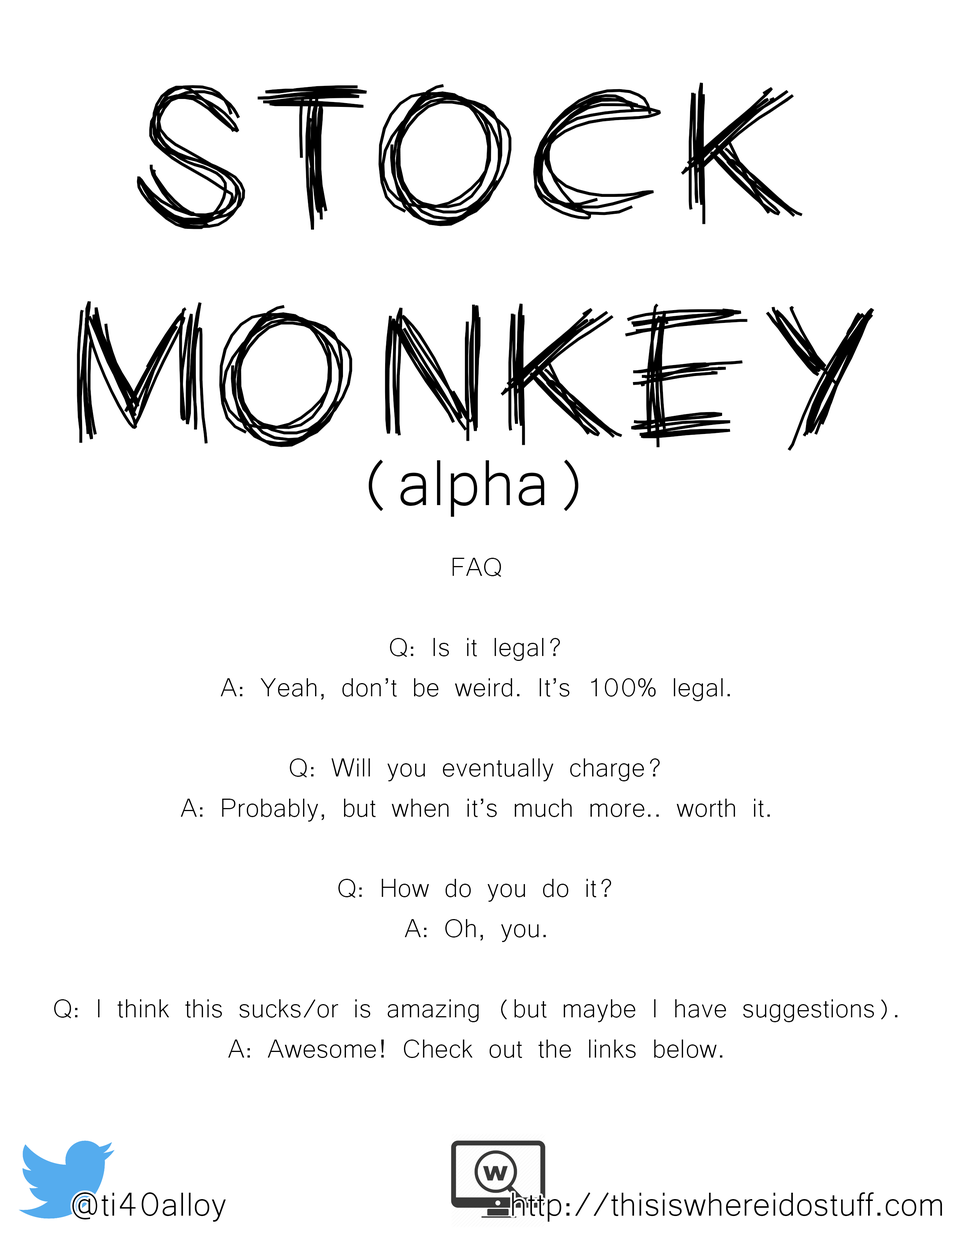
<style>
.page{position:relative;width:960px;height:1242px;background:#ffffff}
.page>*{position:absolute;margin:0}
.t1{font:184px "PWChalk";color:#000000}
.t2{font:83.6px "Microsoft-Yi-Baiti";color:#000000}
.t3{font:33.5px "Microsoft-Yi-Baiti";color:#000000}
.t4{font:42.9px "Microsoft-Yi-Baiti";color:#000000}
</style>
<div class="page">
<p class="t1" style="left:77px;top:82px;width:797px;height:369px;text-align:center">STOCK<br>MONKEY</p>
<p class="t2" style="left:369px;top:460px;width:210px;height:57px">(alpha)</p>
<p class="t3" style="left:54px;top:558px;width:843px;height:500px;text-align:center">FAQ<br><br>Q: Is it legal?<br>A: Yeah, don’t be weird. It’s 100% legal.<br><br>Q: Will you eventually charge?<br>A: Probably, but when it’s much more.. worth it.<br><br>Q: How do you do it?<br>A: Oh, you.<br><br>Q: I think this sucks/or is amazing (but maybe I have suggestions).<br>A: Awesome! Check out the links below.</p>
<p class="t4" style="left:72px;top:1193px;width:870px;height:29px">@ti40alloy               http://thisiswhereidostuff.com</p>
</div>
